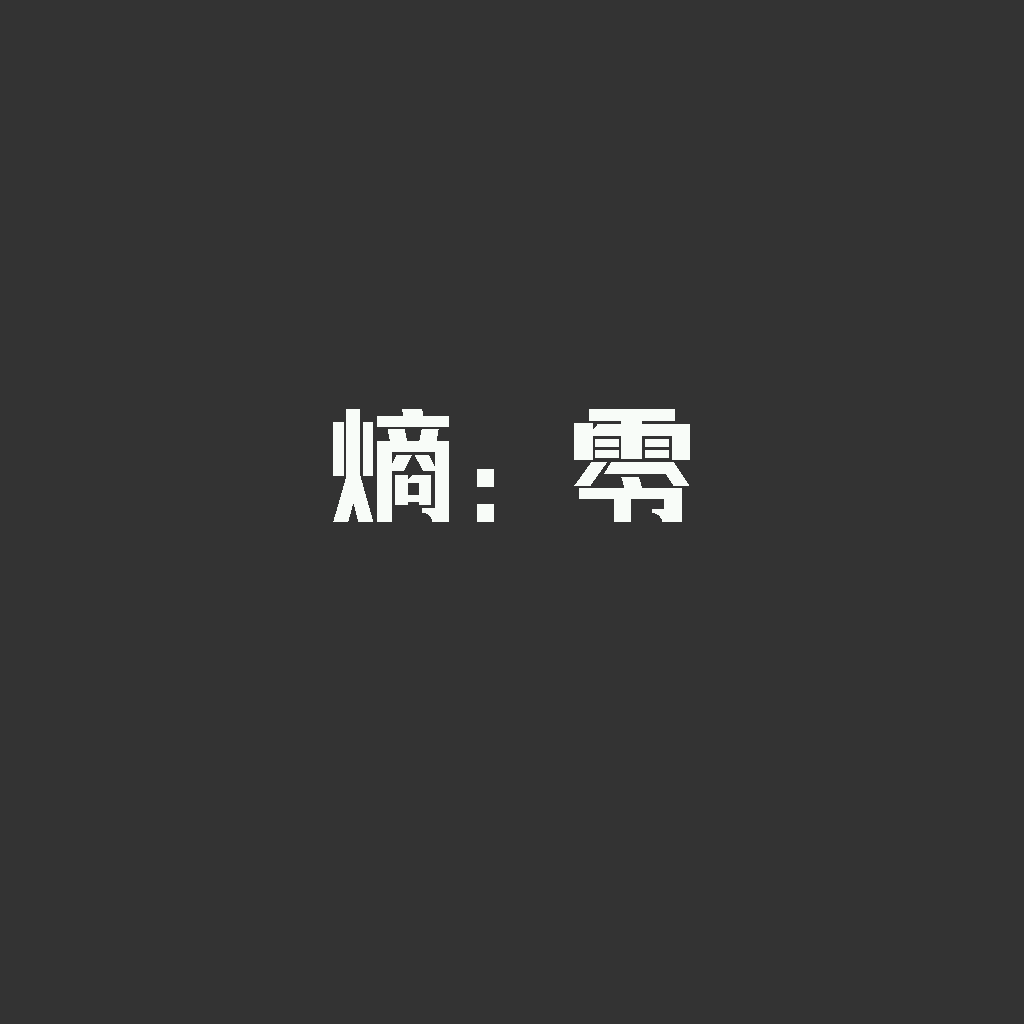
<style>
.page{position:relative;width:1024px;height:1024px;background:#333333}
.page>*{position:absolute;margin:0}
.t1{font:113px "lianmengqiyilushuaizhengruiheiti-Regular";color:#f8fcf8}
</style>
<div class="page">
<p class="t1" style="left:333px;top:409px;width:357px;height:113px">熵：零</p>
</div>
